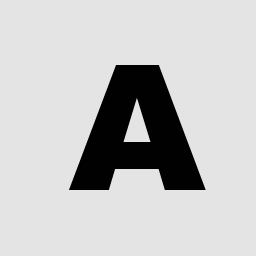
<style>
.page{position:relative;width:256px;height:256px;background:#e4e4e4}
.page>*{position:absolute;margin:0}
.t1{font:174.7px "Arial-Black";color:#010101}
</style>
<div class="page">
<p class="t1" style="left:69px;top:65px;width:137px;height:125px">A</p>
</div>
